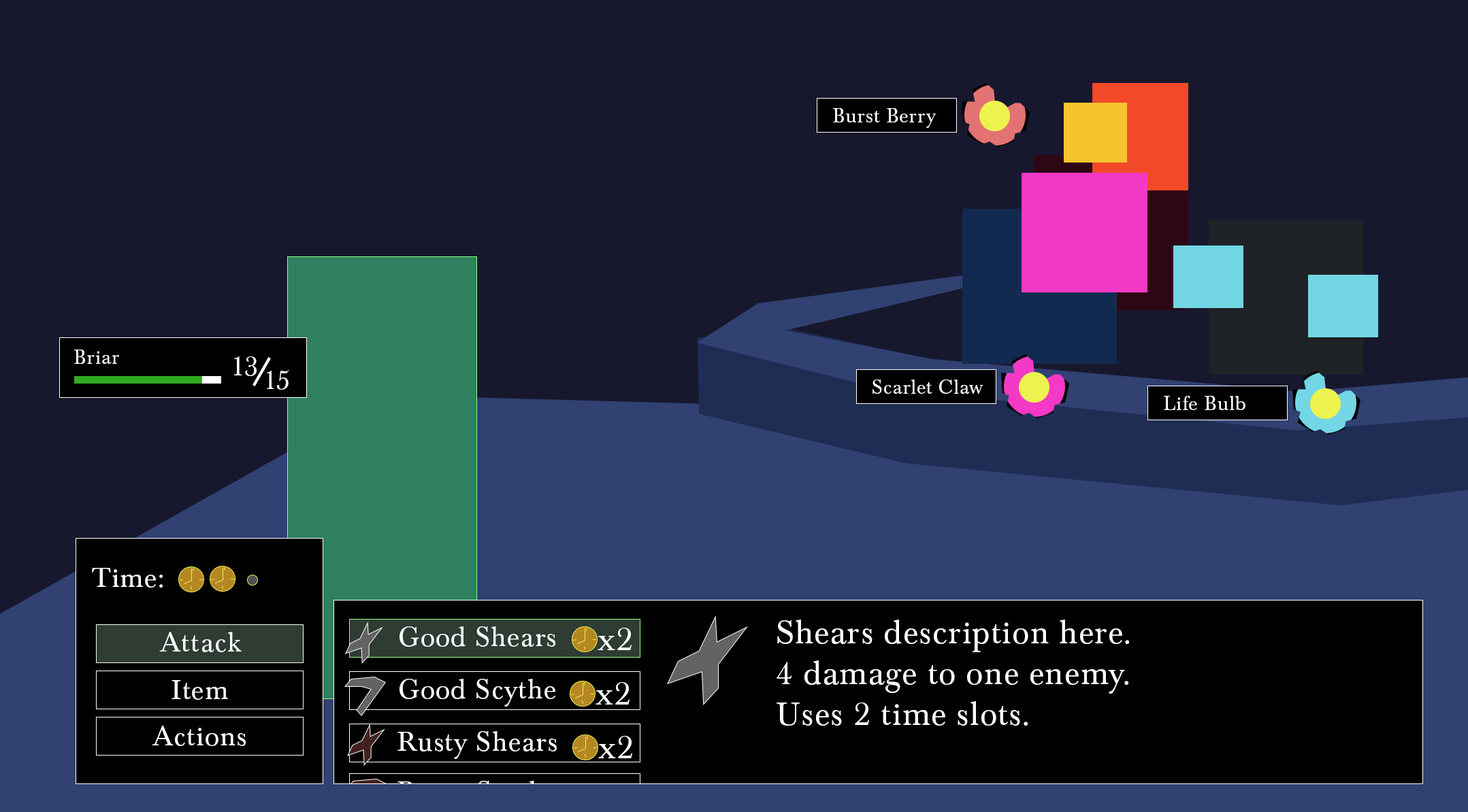
<style>
.page{position:relative;width:1468px;height:812px;background:#17182d}
.page>*{position:absolute;margin:0}
.t1{font:20.6px "BaskervillePro-Regular";letter-spacing:0.025em;color:#ffffff}
.t2{font:28.4px "BaskervillePro-Regular";letter-spacing:0.025em;color:#ffffff}
.t3{font:27.4px "BaskervillePro-Regular";letter-spacing:0.025em;color:#ffffff}
.t4{font:28.6px "BaskervillePro-Regular";letter-spacing:0.025em;color:#ffffff}
.t5{font:34px "BaskervillePro-Regular";letter-spacing:0.025em;color:#ffffff}
</style>
<div class="page">
<p class="t1" style="left:833px;top:108px;width:103px;height:20px">Burst Berry</p>
<p class="t1" style="left:74px;top:350px;width:45px;height:14px">Briar</p>
<p class="t2" style="left:234px;top:357px;width:23px;height:19px">13</p>
<p class="t3" style="left:267px;top:370px;width:22px;height:20px">15</p>
<p class="t1" style="left:872px;top:380px;width:111px;height:14px">Scarlet Claw</p>
<p class="t1" style="left:1164px;top:396px;width:81px;height:14px">Life Bulb</p>
<p class="t4" style="left:92px;top:568px;width:71px;height:20px">Time:</p>
<p class="t4" style="left:399px;top:627px;width:156px;height:20px">Good Shears</p>
<p class="t5" style="left:597px;top:628px;width:34px;height:23px">x2</p>
<p class="t5" style="left:776px;top:620px;width:353px;height:106px">Shears description here.<br>4 damage to one enemy.<br>Uses 2 time slots.</p>
<p class="t4" style="left:159px;top:632px;width:83px;height:21px">Attack</p>
<p class="t4" style="left:171px;top:680px;width:57px;height:20px">Item</p>
<p class="t4" style="left:399px;top:679px;width:156px;height:28px">Good Scythe</p>
<p class="t5" style="left:595px;top:682px;width:34px;height:23px">x2</p>
<p class="t4" style="left:152px;top:726px;width:94px;height:20px">Actions</p>
<p class="t4" style="left:397px;top:731px;width:160px;height:28px">Rusty Shears</p>
<p class="t5" style="left:598px;top:736px;width:34px;height:23px">x2</p>
</div>
